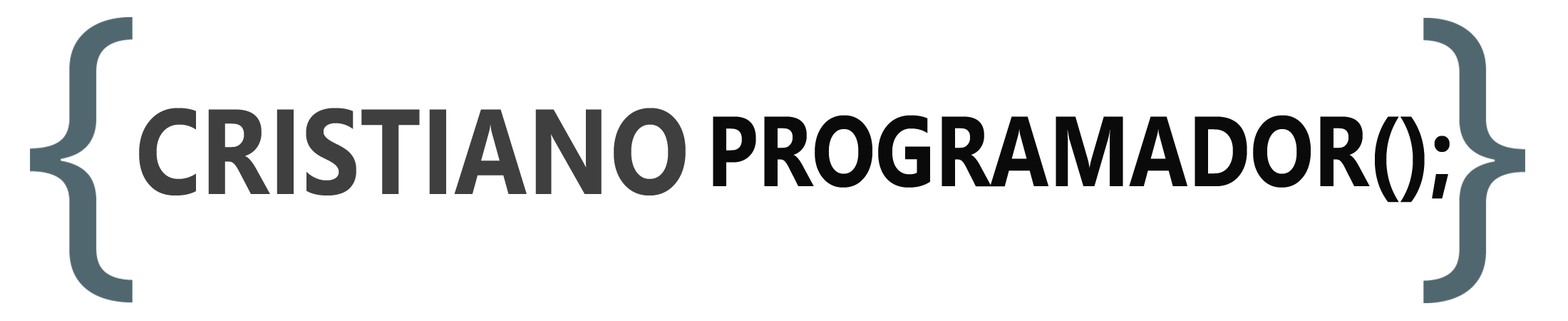
<style>
.page{position:relative;width:1568px;height:321px;background:#ffffff}
.page>*{position:absolute;margin:0}
.t1{font:120.6px "NirmalaUI-Bold";color:#3f3f3f;scale:0.86 1}
.t2{font:99.2px "NirmalaUI-Bold";color:#0a0a0a;scale:0.85 1}
</style>
<div class="page">
<p class="t1" style="left:139px;top:108px;width:547px;height:87px">CRISTIANO</p>
<p class="t2" style="left:713px;top:115px;width:737px;height:87px">PROGRAMADOR();</p>
</div>
